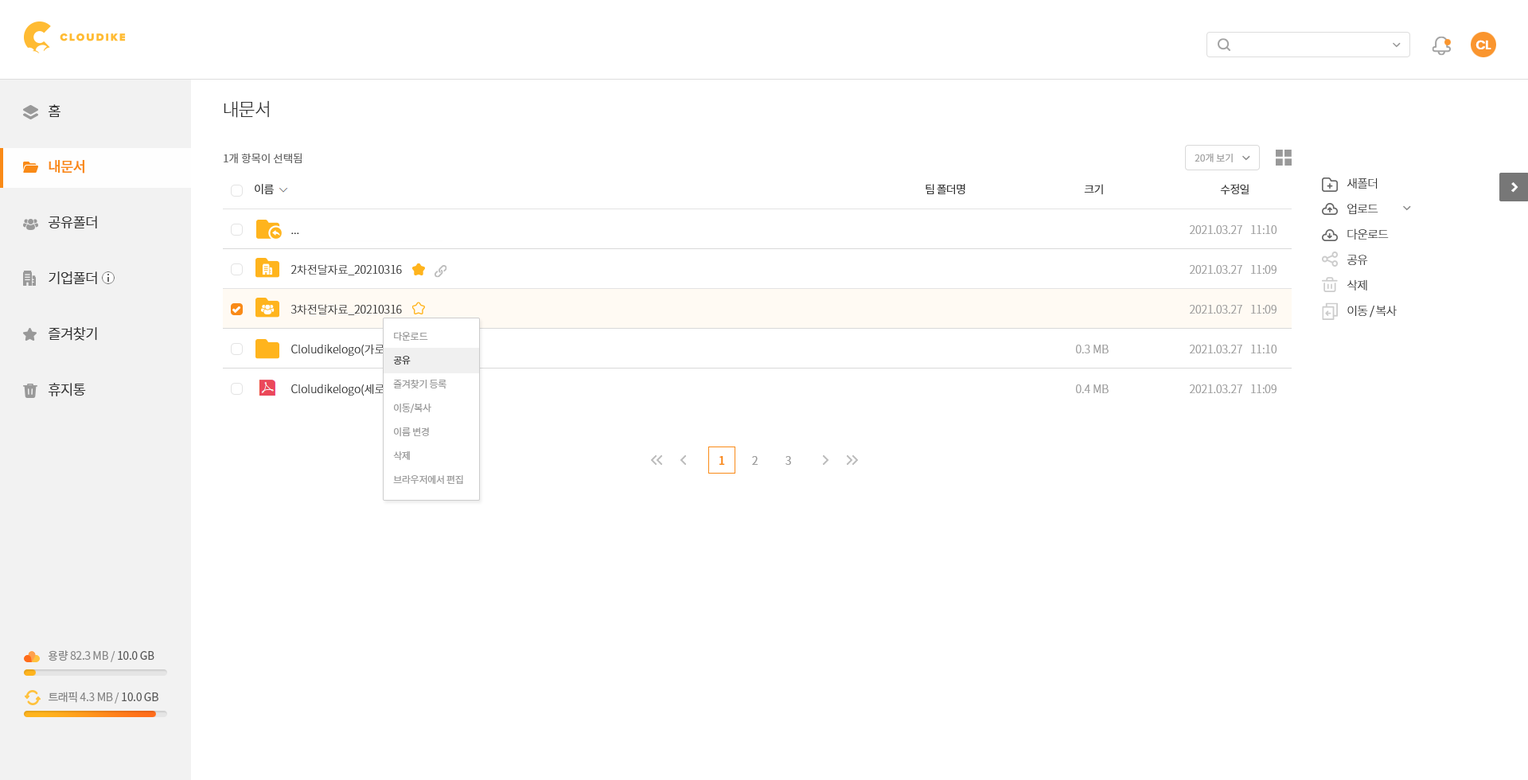
<style>
.page{position:relative;width:1528px;height:780px;background:#ffffff}
.page>*{position:absolute;margin:0}
.t1{font:12.7px "Poppins-SemiBold";letter-spacing:-0.05em;color:#ffffff}
.t2{font:18.3px "NotoSansCJKkr-Light";letter-spacing:-0.05em;color:#333333}
.t3{font:14.3px/55.7px "NotoSansCJKkr-DemiLight";letter-spacing:-0.05em;color:#333333}
.t4{font:14.3px/55.7px "NotoSansCJKkr-Medium";letter-spacing:-0.05em;color:#f98a17}
.t5{font:10.7px "NotoSansCJKkr-DemiLight";color:#666666}
.t6{font:9.6px "NotoSansCJKkr-DemiLight";color:#a1a1a1}
.t7{font:11.1px "NotoSansCJKkr-DemiLight";letter-spacing:-0.05em;color:#333333}
.t8{font:11.9px/25.5px "NotoSansCJKkr-Light";letter-spacing:-0.05em;color:#333333}
.t9{font:11.1px/39.8px "NotoSansCJKkr-Light";color:#333333}
.t10{font:11.1px/39.8px "NotoSansCJKkr-Light";color:#999999}
.t11{font:9.6px/23.9px "NotoSansCJKkr-DemiLight";letter-spacing:-0.025em;color:#999999}
.t12{font:9.6px/23.9px "NotoSansCJKkr-DemiLight";letter-spacing:-0.025em;color:#333333}
.t13{font:11.1px "NotoSansCJKkr-Medium";color:#f98a17}
.t14{font:11.1px "NotoSansCJKkr-DemiLight";color:#999999}
.t15{font:11.1px "NotoSansCJKkr-Regular";letter-spacing:-0.025em;color:#888888}
.t16{font:11.1px "NotoSansCJKkr-Regular";letter-spacing:-0.025em;color:#585858}
</style>
<div class="page">
<p class="t1" style="left:1476px;top:40px;width:16px;height:9px">CL</p>
<p class="t2" style="left:224px;top:100px;width:45px;height:18px">내문서</p>
<p class="t3" style="left:49px;top:104px;width:48px;height:292px">홈<br><span class="t4">내문서<br></span>공유폴더<br>기업폴더<br>즐겨찾기<br>휴지통</p>
<p class="t5" style="left:224px;top:153px;width:78px;height:11px">1개 항목이 선택됨</p>
<p class="t6" style="left:1195px;top:153px;width:38px;height:9px">20개 보기</p>
<p class="t7" style="left:255px;top:184px;width:19px;height:10px">이름</p>
<p class="t7" style="left:926px;top:184px;width:40px;height:10px">팀 폴더명</p>
<p class="t7" style="left:1084px;top:184px;width:19px;height:11px">크기</p>
<p class="t7" style="left:1220px;top:184px;width:30px;height:11px">수정일</p>
<p class="t8" style="left:1347px;top:178px;width:50px;height:140px">새폴더<br>업로드<br>다운로드<br>공유<br>삭제<br>이동 / 복사</p>
<p class="t9" style="left:291px;top:232px;width:140px;height:164px">...<br>2차전달자료_20210316<br>3차전달자료_20210316<br>Cloludikelogo(가로)주황색.ai<br>Cloludikelogo(세로)블랙.ai</p>
<p class="t10" style="left:1190px;top:225px;width:88px;height:168px">2021.03.27   11:10<br>2021.03.27   11:09<br>2021.03.27   11:09<br>2021.03.27   11:10<br>2021.03.27   11:09</p>
<p class="t11" style="left:393px;top:332px;width:70px;height:153px">다운로드<br><span class="t12">공유<br></span>즐겨찾기 등록<br>이동/복사<br>이름 변경<br>삭제<br>브라우저에서 편집</p>
<p class="t10" style="left:1076px;top:345px;width:33px;height:48px">0.3 MB<br>0.4 MB</p>
<p class="t13" style="left:720px;top:456px;width:5px;height:9px">1</p>
<p class="t14" style="left:752px;top:456px;width:6px;height:9px">2</p>
<p class="t14" style="left:786px;top:456px;width:5px;height:9px">3</p>
<p class="t15" style="left:48px;top:650px;width:106px;height:12px">용량 82.3 MB / <span class="t16">10.0 GB</span></p>
<p class="t15" style="left:49px;top:692px;width:109px;height:12px">트래픽 4.3 MB / <span class="t16">10.0 GB</span></p>
</div>
